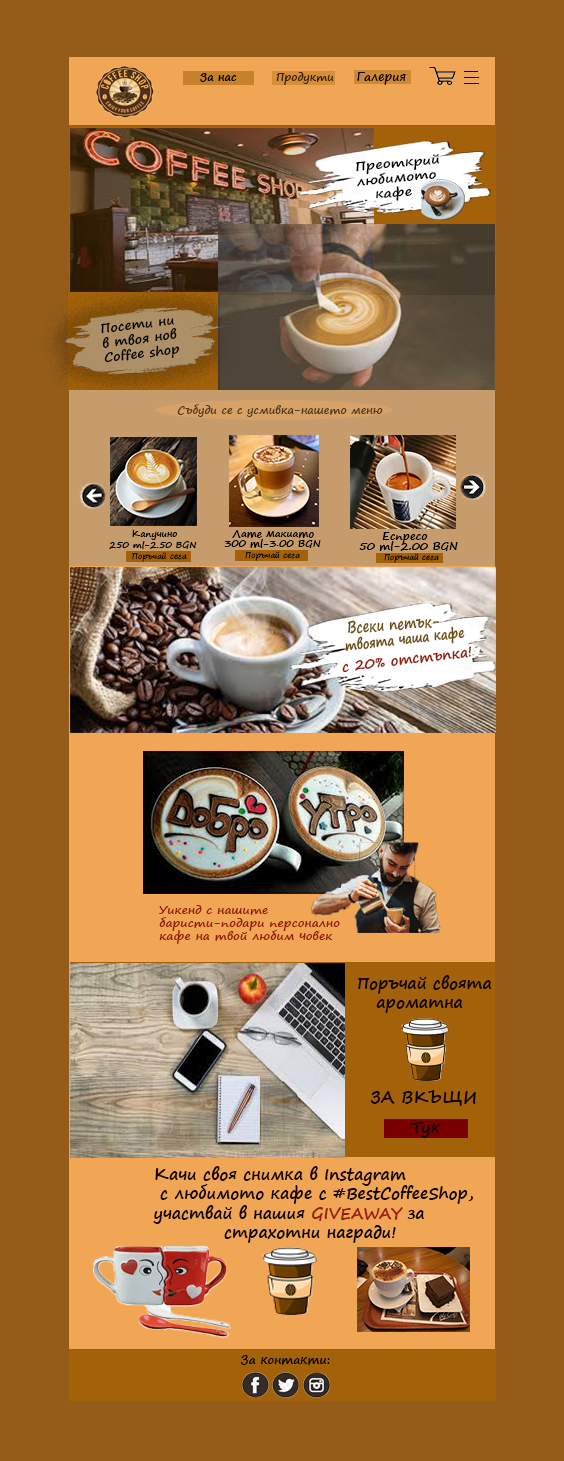
<style>
.page{position:relative;width:564px;height:1461px;background:#955c19}
.page>*{position:absolute;margin:0}
.t1{font:11px "SegoePrint-Bold";color:#000200}
.t2{font:11px "SegoePrint-Bold";color:#392403}
.t3{font:12px "SegoePrint-Bold";color:#000200}
.t4{font:12.2px "SegoePrint-Bold";color:#000200;scale:1.18 1}
.t5{font:12.3px "SegoePrint-Bold";color:#000200;scale:1.09 1}
.t6{font:11px "SegoePrint-Bold";color:#533b1f}
.t7{font:9px "SegoePrint-Bold";color:#000200}
.t8{font:10px "SegoePrint-Bold";color:#000200}
.t9{font:8px "SegoePrint-Bold";color:#000200}
.t10{font:13.9px "SegoePrint-Bold";color:#6a4e0a;scale:0.85 1}
.t11{font:15.7px "SegoePrint-Bold";color:#6a4e0a;scale:0.79 1}
.t12{font:14px "SegoePrint-Bold";color:#931b0c}
.t13{font:11px "SegoePrint-Bold";color:#931b0c;scale:1.1 1}
.t14{font:16px "SegoePrint-Bold";color:#110402}
.t15{font:16px "SegoePrint-Bold";color:#971e0e}
.t16{font:16px "SegoePrint-Bold";color:#080201}
</style>
<div class="page">
<p class="t1" style="left:200px;top:73px;width:37px;height:9px">За нас</p>
<p class="t2" style="left:276px;top:72px;width:58px;height:13px">Продукти</p>
<p class="t3" style="left:357px;top:72px;width:49px;height:13px">Галерия</p>
<p class="t4" style="left:356px;top:154px;width:84px;height:47px;rotate:-5deg">Преоткрий <br>любимото <br>   кафе</p>
<p class="t5" style="left:101px;top:318px;width:79px;height:45px;rotate:-7deg">Посети ни <br>в твоя нов<br>Coffee shop</p>
<p class="t6" style="left:177px;top:404px;width:206px;height:13px">Събуди се с усмивка-нашето меню</p>
<p class="t7" style="left:132px;top:530px;width:45px;height:10px">Капучино</p>
<p class="t8" style="left:232px;top:530px;width:82px;height:8px">Лате макиато</p>
<p class="t1" style="left:382px;top:532px;width:46px;height:12px">Еспресо</p>
<p class="t7" style="left:109px;top:541px;width:88px;height:8px">250 ml-2.50 BGN</p>
<p class="t8" style="left:224px;top:539px;width:97px;height:9px">300 ml-3.00 BGN</p>
<p class="t1" style="left:359px;top:541px;width:99px;height:10px">50 ml-2.00 BGN</p>
<p class="t9" style="left:132px;top:552px;width:55px;height:10px">Поръчай сега</p>
<p class="t9" style="left:245px;top:551px;width:55px;height:10px">Поръчай сега</p>
<p class="t9" style="left:384px;top:553px;width:55px;height:10px">Поръчай сега</p>
<p class="t10" style="left:345px;top:626px;width:120px;height:26px;rotate:-7deg">твоята чаша кафе</p>
<p class="t11" style="left:348px;top:618px;width:91px;height:16px;rotate:-4deg">Всеки петък-</p>
<p class="t12" style="left:342px;top:646px;width:130px;height:27px;rotate:-7deg">с 20% отстъпка!</p>
<p class="t13" style="left:159px;top:905px;width:181px;height:39px">Уикенд с нашите<br>баристи-подари персонално <br>кафе на твой любим човек</p>
<p class="t14" style="left:358px;top:975px;width:134px;height:38px">Поръчай своята<br>   ароматна</p>
<p class="t14" style="left:370px;top:1090px;width:106px;height:16px">ЗА ВКЪЩИ</p>
<p class="t14" style="left:411px;top:1122px;width:29px;height:16px">Тук</p>
<p class="t14" style="left:153px;top:1166px;width:320px;height:77px">Качи своя снимка в Instagram<br> с любимото кафе с #BestCoffeeShop,<br>участвай в нашия <span class="t15">GIVEAWAY </span><span class="t16">за<br>           страхотни награди!</span></p>
<p class="t3" style="left:241px;top:1355px;width:89px;height:10px">За контакти:</p>
</div>
